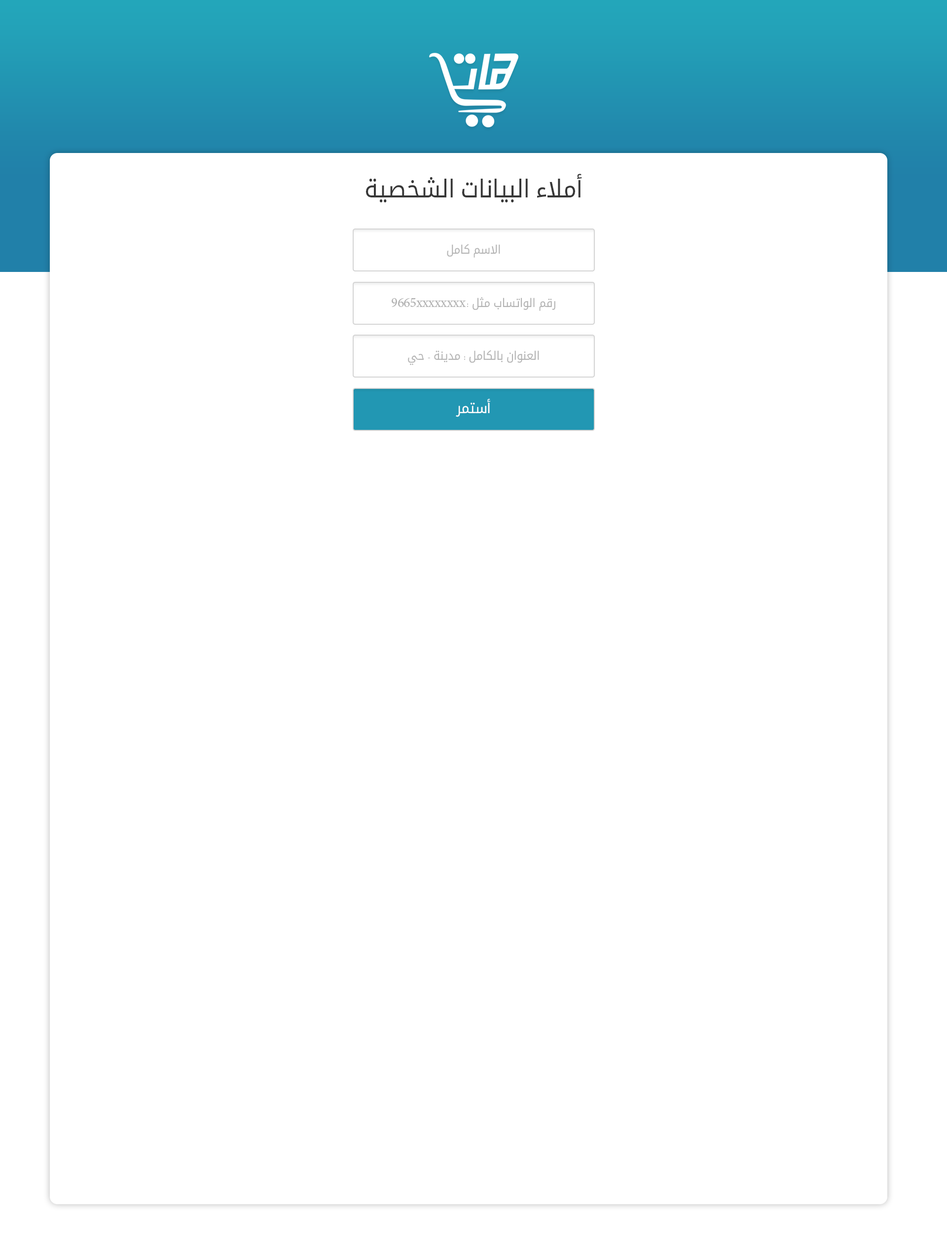
<style>
.page{position:relative;width:947px;height:1259px;background:#ffffff}
.page>*{position:absolute;margin:0}
.t1{font:24.7px "NotoKufiArabic";letter-spacing:-0.015em;color:#373737;scale:0.94 1}
.t2{font:11.8px "NotoKufiArabic";letter-spacing:-0.015em;color:#b3b3b3;scale:0.94 1}
.t3{font:11.8px "AdobeArabic-Regular";letter-spacing:-0.015em;color:#b3b3b3;scale:0.94 1}
.t4{font:19.7px "AdobeArabic-Regular";letter-spacing:-0.015em;color:#b3b3b3;scale:0.94 1}
.t5{font:14.8px "NotoKufiArabic";letter-spacing:-0.015em;color:#ffffff;scale:0.94 1}
</style>
<div class="page">
<p class="t1" style="left:366px;top:174px;width:216px;height:28px">أملاء البيانات الشخصية</p>
<p class="t2" style="left:447px;top:244px;width:53px;height:14px">الاسم كامل</p>
<p class="t2" style="left:392px;top:297px;width:164px;height:14px">رقم الواتساب مثل <span class="t3">: </span><span class="t4">9665xxxxxxxx</span></p>
<p class="t2" style="left:408px;top:350px;width:131px;height:15px">العنوان بالكامل <span class="t3">:</span> مدينة <span class="t3">-</span> حي</p>
<p class="t5" style="left:456px;top:399px;width:34px;height:18px">أستمر</p>
</div>
